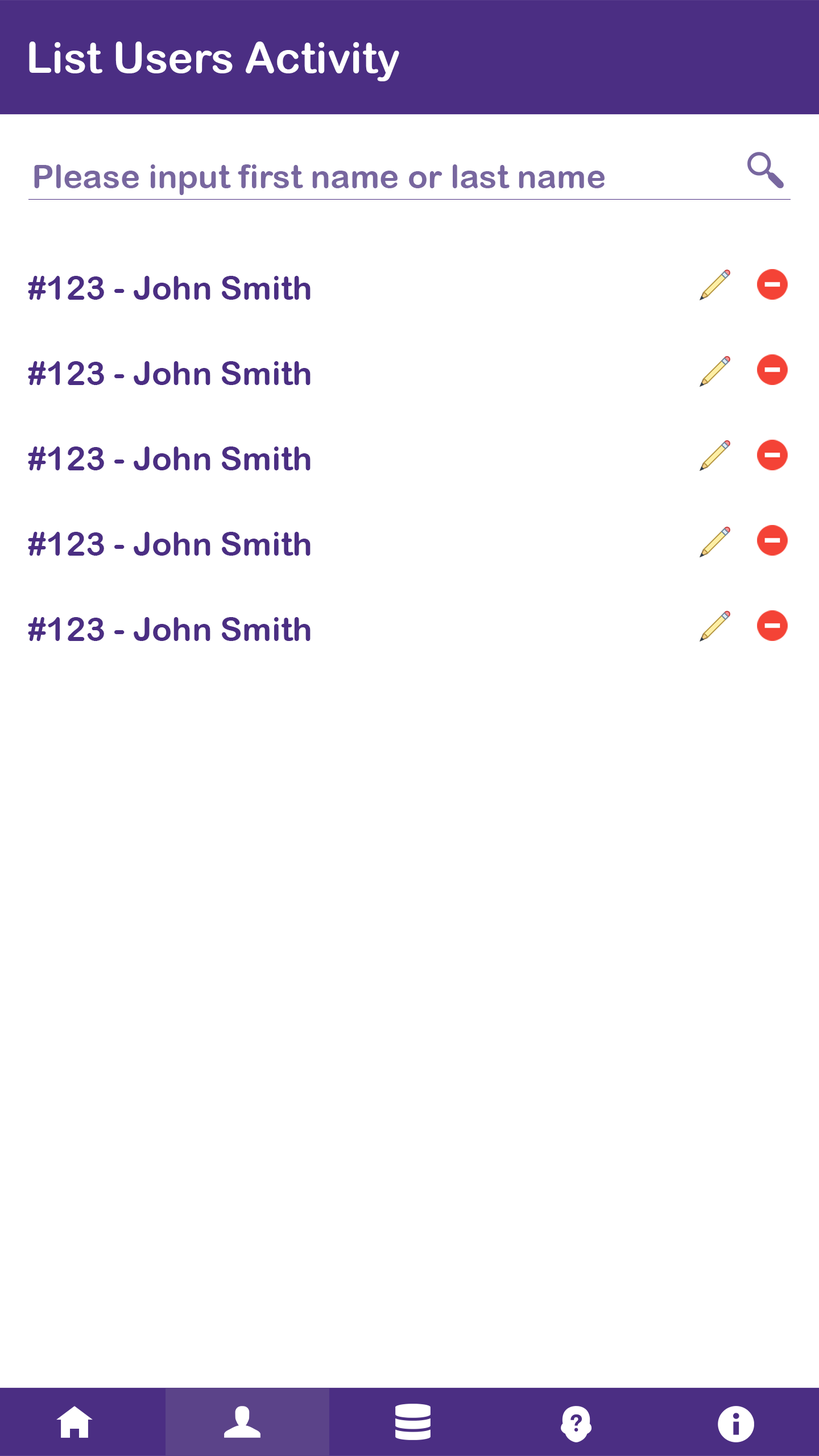
<style>
.page{position:relative;width:819px;height:1456px;background:#ffffff}
.page>*{position:absolute;margin:0}
.t1{font:42.7px "ArialRoundedMTBold";color:#ffffff}
.t2{font:33.2px "ArialRoundedMTBold";color:#78679f}
.t3{font:33.2px "ArialRoundedMTBold";color:#4b2e83}
</style>
<div class="page">
<p class="t1" style="left:29px;top:42px;width:370px;height:39px">List Users Activity</p>
<p class="t2" style="left:34px;top:164px;width:571px;height:31px">Please input first name or last name</p>
<p class="t3" style="left:28px;top:276px;width:283px;height:24px">#123 - John Smith</p>
<p class="t3" style="left:28px;top:361px;width:283px;height:24px">#123 - John Smith</p>
<p class="t3" style="left:28px;top:446px;width:283px;height:24px">#123 - John Smith</p>
<p class="t3" style="left:28px;top:532px;width:283px;height:24px">#123 - John Smith</p>
<p class="t3" style="left:28px;top:617px;width:283px;height:24px">#123 - John Smith</p>
</div>
